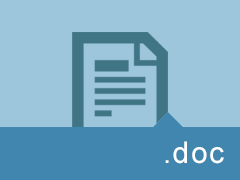
<style>
.page{position:relative;width:240px;height:180px;background:#9dc6dd}
.page>*{position:absolute;margin:0}
.t1{font:30px "ArialMT";letter-spacing:0.05em;color:#ffffff}
</style>
<div class="page">
<p class="t1" style="left:165px;top:141px;width:59px;height:23px">.doc</p>
</div>
